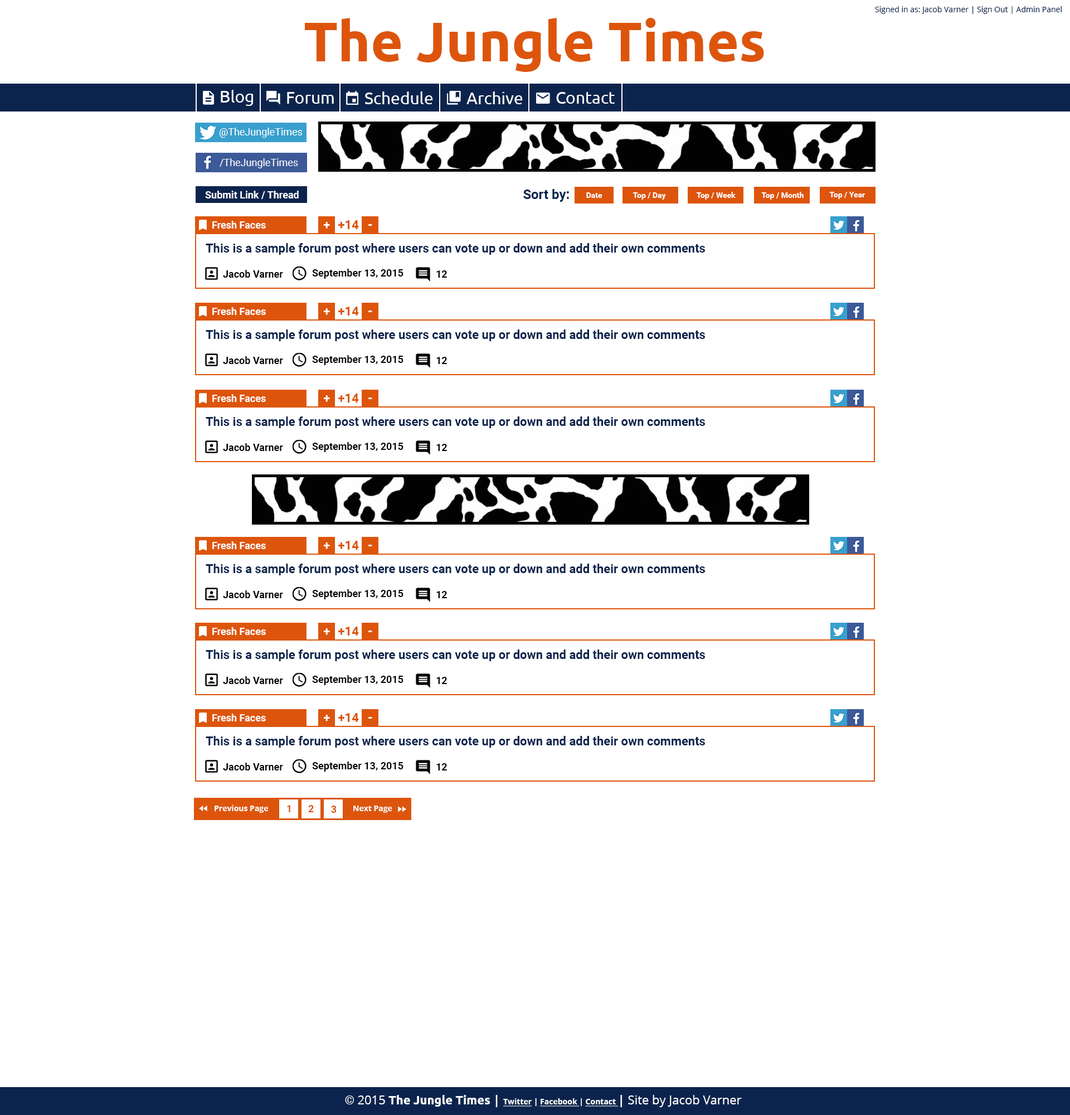
<style>
.page{position:relative;width:1070px;height:1115px;background:#ffffff}
.page>*{position:absolute;margin:0}
.t1{font:55.7px "Ubuntu-Bold";color:#dd550c}
.t2{font:7.8px "OpenSans";color:#0c244d}
.t3{font:16.7px "Ubuntu";color:#ffffff}
.t4{font:10px "Roboto-Regular";color:#ffffff}
.t5{font:10px "Roboto-Bold";color:#ffffff}
.t6{font:13.4px "Roboto-Bold";color:#03244d}
.t7{font:7.8px "Roboto-Bold";color:#ffffff}
.t8{font:12.3px "Roboto-Bold";color:#0c244d}
.t9{font:10px "Roboto-Bold";color:#000000}
.t10{font:7.8px "OpenSans-Bold";color:#ffffff}
.t11{font:10px "Roboto-Bold";color:#dd550c}
.t12{font:12.3px "OpenSans";color:#ffffff}
.t13{font:12.3px "Roboto-Bold";color:#ffffff}
.t14{font:12.3px "Ubuntu-Bold";color:#ffffff}
.t15{font:12.3px "OpenSans-Bold";color:#ffffff}
.t16{font:7.8px "OpenSans-Bold";color:#ffffff;text-decoration:underline}
</style>
<div class="page">
<p class="t1" style="left:305px;top:18px;width:459px;height:54px">The Jungle Times</p>
<p class="t2" style="left:875px;top:6px;width:187px;height:8px">Signed in as: Jacob Varner | Sign Out | Admin Panel</p>
<p class="t3" style="left:221px;top:90px;width:32px;height:16px">Blog</p>
<p class="t3" style="left:287px;top:92px;width:47px;height:12px">Forum</p>
<p class="t3" style="left:365px;top:91px;width:68px;height:13px">Schedule</p>
<p class="t3" style="left:466px;top:91px;width:57px;height:13px">Archive</p>
<p class="t3" style="left:556px;top:92px;width:59px;height:12px">Contact</p>
<p class="t4" style="left:219px;top:128px;width:83px;height:10px">@TheJungleTimes</p>
<p class="t4" style="left:220px;top:158px;width:78px;height:10px">/TheJungleTimes</p>
<p class="t5" style="left:205px;top:191px;width:94px;height:8px">Submit Link / Thread</p>
<p class="t6" style="left:523px;top:189px;width:46px;height:13px">Sort by:</p>
<p class="t7" style="left:586px;top:192px;width:16px;height:6px">Date</p>
<p class="t7" style="left:632px;top:192px;width:34px;height:7px">Top / Day</p>
<p class="t7" style="left:696px;top:192px;width:40px;height:7px">Top / Week</p>
<p class="t7" style="left:761px;top:192px;width:43px;height:7px">Top / Month</p>
<p class="t7" style="left:829px;top:192px;width:36px;height:7px">Top / Year</p>
<p class="t5" style="left:212px;top:221px;width:54px;height:7px">Fresh Faces</p>
<p class="t8" style="left:206px;top:243px;width:499px;height:12px">This is a sample forum post where users can vote up or down and add their own comments</p>
<p class="t9" style="left:223px;top:270px;width:60px;height:8px">Jacob Varner</p>
<p class="t9" style="left:312px;top:269px;width:91px;height:10px">September 13, 2015</p>
<p class="t9" style="left:436px;top:270px;width:11px;height:8px">12</p>
<p class="t5" style="left:212px;top:307px;width:54px;height:8px">Fresh Faces</p>
<p class="t8" style="left:206px;top:329px;width:499px;height:12px">This is a sample forum post where users can vote up or down and add their own comments</p>
<p class="t9" style="left:223px;top:356px;width:60px;height:8px">Jacob Varner</p>
<p class="t9" style="left:312px;top:355px;width:91px;height:10px">September 13, 2015</p>
<p class="t9" style="left:436px;top:357px;width:11px;height:7px">12</p>
<p class="t5" style="left:212px;top:394px;width:54px;height:8px">Fresh Faces</p>
<p class="t8" style="left:206px;top:416px;width:499px;height:12px">This is a sample forum post where users can vote up or down and add their own comments</p>
<p class="t9" style="left:223px;top:443px;width:60px;height:8px">Jacob Varner</p>
<p class="t9" style="left:312px;top:442px;width:91px;height:10px">September 13, 2015</p>
<p class="t9" style="left:436px;top:444px;width:11px;height:7px">12</p>
<p class="t5" style="left:212px;top:541px;width:54px;height:8px">Fresh Faces</p>
<p class="t8" style="left:206px;top:563px;width:499px;height:12px">This is a sample forum post where users can vote up or down and add their own comments</p>
<p class="t9" style="left:223px;top:590px;width:60px;height:8px">Jacob Varner</p>
<p class="t9" style="left:312px;top:589px;width:91px;height:10px">September 13, 2015</p>
<p class="t9" style="left:436px;top:591px;width:11px;height:7px">12</p>
<p class="t5" style="left:212px;top:627px;width:54px;height:8px">Fresh Faces</p>
<p class="t8" style="left:206px;top:649px;width:499px;height:12px">This is a sample forum post where users can vote up or down and add their own comments</p>
<p class="t9" style="left:223px;top:676px;width:60px;height:8px">Jacob Varner</p>
<p class="t9" style="left:312px;top:675px;width:91px;height:10px">September 13, 2015</p>
<p class="t9" style="left:436px;top:677px;width:11px;height:7px">12</p>
<p class="t5" style="left:212px;top:713px;width:54px;height:8px">Fresh Faces</p>
<p class="t8" style="left:206px;top:736px;width:499px;height:11px">This is a sample forum post where users can vote up or down and add their own comments</p>
<p class="t9" style="left:312px;top:761px;width:91px;height:10px">September 13, 2015</p>
<p class="t9" style="left:223px;top:762px;width:60px;height:8px">Jacob Varner</p>
<p class="t9" style="left:436px;top:763px;width:11px;height:7px">12</p>
<p class="t10" style="left:215px;top:805px;width:53px;height:7px">Previous Page</p>
<p class="t11" style="left:287px;top:805px;width:3px;height:7px">1</p>
<p class="t11" style="left:308px;top:805px;width:6px;height:7px">2</p>
<p class="t11" style="left:331px;top:805px;width:6px;height:7px">3</p>
<p class="t10" style="left:353px;top:805px;width:39px;height:7px">Next Page</p>
<p class="t12" style="left:345px;top:1094px;width:397px;height:13px"><span class="t13">© </span>2015 <span class="t14">The Jungle Times </span><span class="t15">| </span><span class="t16">Twitter</span><span class="t10"> | </span><span class="t16">Facebook </span><span class="t10">| </span><span class="t16">Contact </span><span class="t15">| </span>Site by Jacob Varner</p>
</div>
